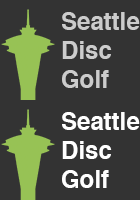
<style>
.page{position:relative;width:140px;height:200px;background:#333333}
.page>*{position:absolute;margin:0}
.t1{font:24px "Helvetica-Bold";color:#cccccc}
.t2{font:24px "Helvetica-Bold";color:#ffffff}
</style>
<div class="page">
<p class="t1" style="left:62px;top:12px;width:78px;height:76px">Seattle<br>Disc <br>Golf</p>
<p class="t2" style="left:62px;top:112px;width:78px;height:76px">Seattle<br>Disc <br>Golf</p>
</div>
